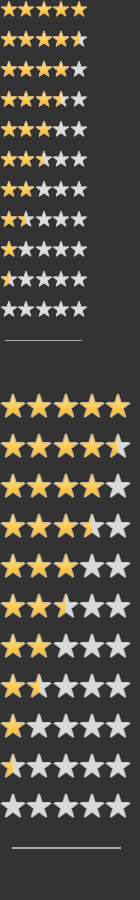
<style>
.page{position:relative;width:140px;height:900px;background:#333333}
.page>*{position:absolute;margin:0}
.t1{font:16px "HiraKakuPro-W3";letter-spacing:0.1em;color:#ffcb5a}
.t2{font:16px "HiraKakuPro-W3";letter-spacing:0.1em}
.t3{font:16px "HiraKakuPro-W3";letter-spacing:0.1em;color:#dddddd}
.t4{font:24px "HiraKakuPro-W3";letter-spacing:0.1em}
</style>
<div class="page">
<p class="t1" style="left:1px;top:1px;width:86px;height:16px">★★★★★</p>
<p class="t2" style="left:1px;top:31px;width:86px;height:16px">★★★★★</p>
<p class="t2" style="left:1px;top:61px;width:86px;height:16px">★★★★★</p>
<p class="t2" style="left:1px;top:91px;width:86px;height:16px">★★★★★</p>
<p class="t2" style="left:1px;top:121px;width:86px;height:16px">★★★★★</p>
<p class="t2" style="left:1px;top:151px;width:86px;height:16px">★★★★★</p>
<p class="t3" style="left:1px;top:181px;width:86px;height:16px">★★★★★</p>
<p class="t3" style="left:1px;top:211px;width:86px;height:16px">★★★★★</p>
<p class="t3" style="left:1px;top:241px;width:86px;height:16px">★★★★★</p>
<p class="t3" style="left:1px;top:271px;width:86px;height:16px">★★★★★</p>
<p class="t3" style="left:1px;top:301px;width:86px;height:16px">★★★★★</p>
<p class="t4" style="left:1px;top:394px;width:129px;height:23px">★★★★★</p>
</div>
